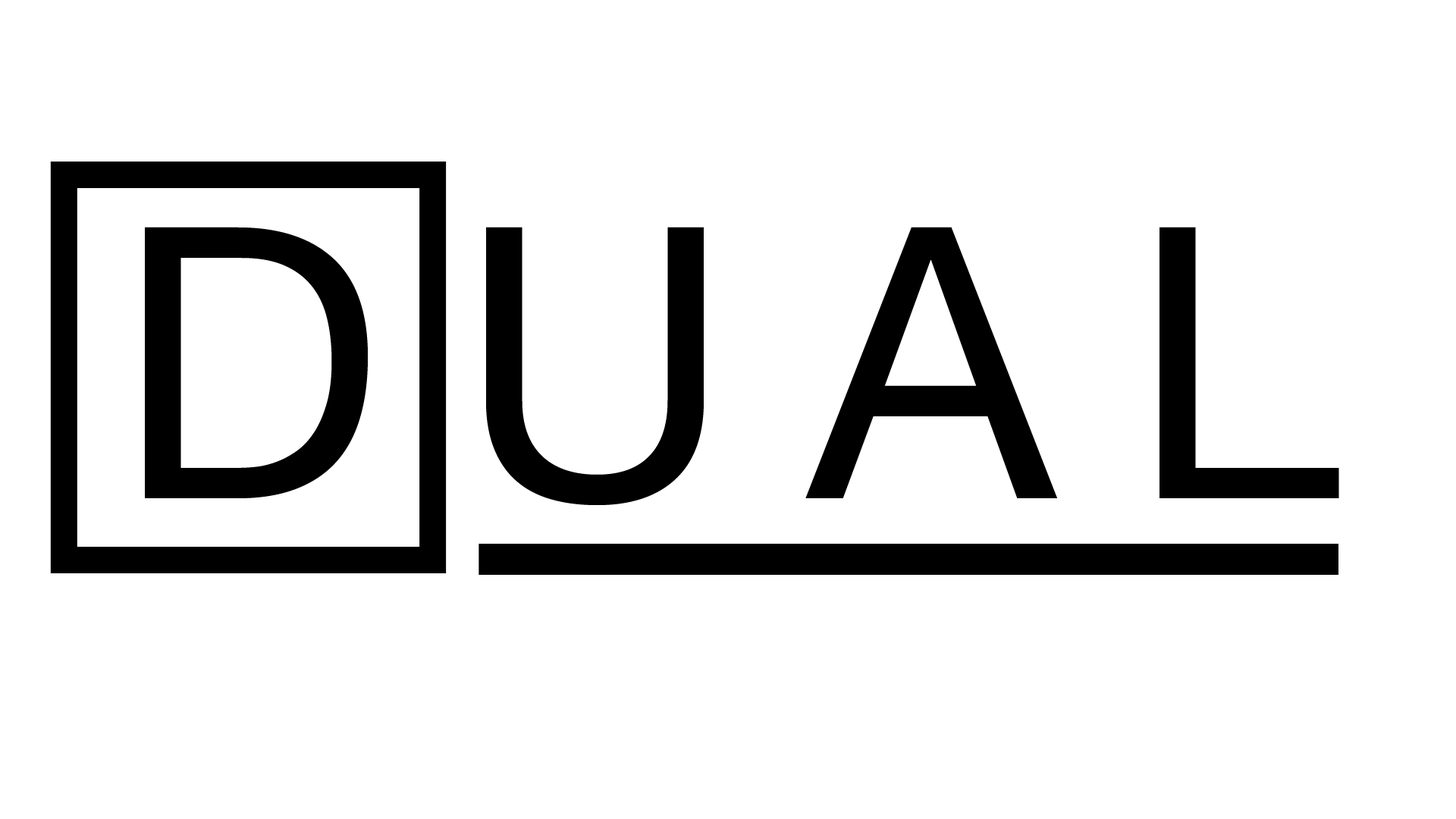
<style>
.page{position:relative;width:1456px;height:819px;background:#ffffff}
.page>*{position:absolute;margin:0}
.t1{font:379.2px "HelveticaNeueLTCom-Roman";letter-spacing:0.2em;color:#000000}
</style>
<div class="page">
<p class="t1" style="left:145px;top:227px;width:1194px;height:278px">DUAL</p>
</div>
